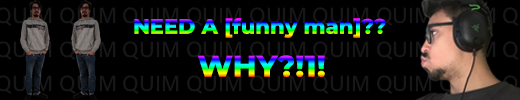
<style>
.page{position:relative;width:520px;height:100px;background:#000000}
.page>*{position:absolute;margin:0}
.t1{font:21px "MontserratRoman-ExtraBold"}
.t2{font:30px "MontserratRoman-ExtraBold"}
</style>
<div class="page">
<p class="t1" style="left:134px;top:18px;width:252px;height:20px">NEED A [funny man]??</p>
<p class="t2" style="left:198px;top:55px;width:127px;height:22px">WHY?!1!</p>
</div>
